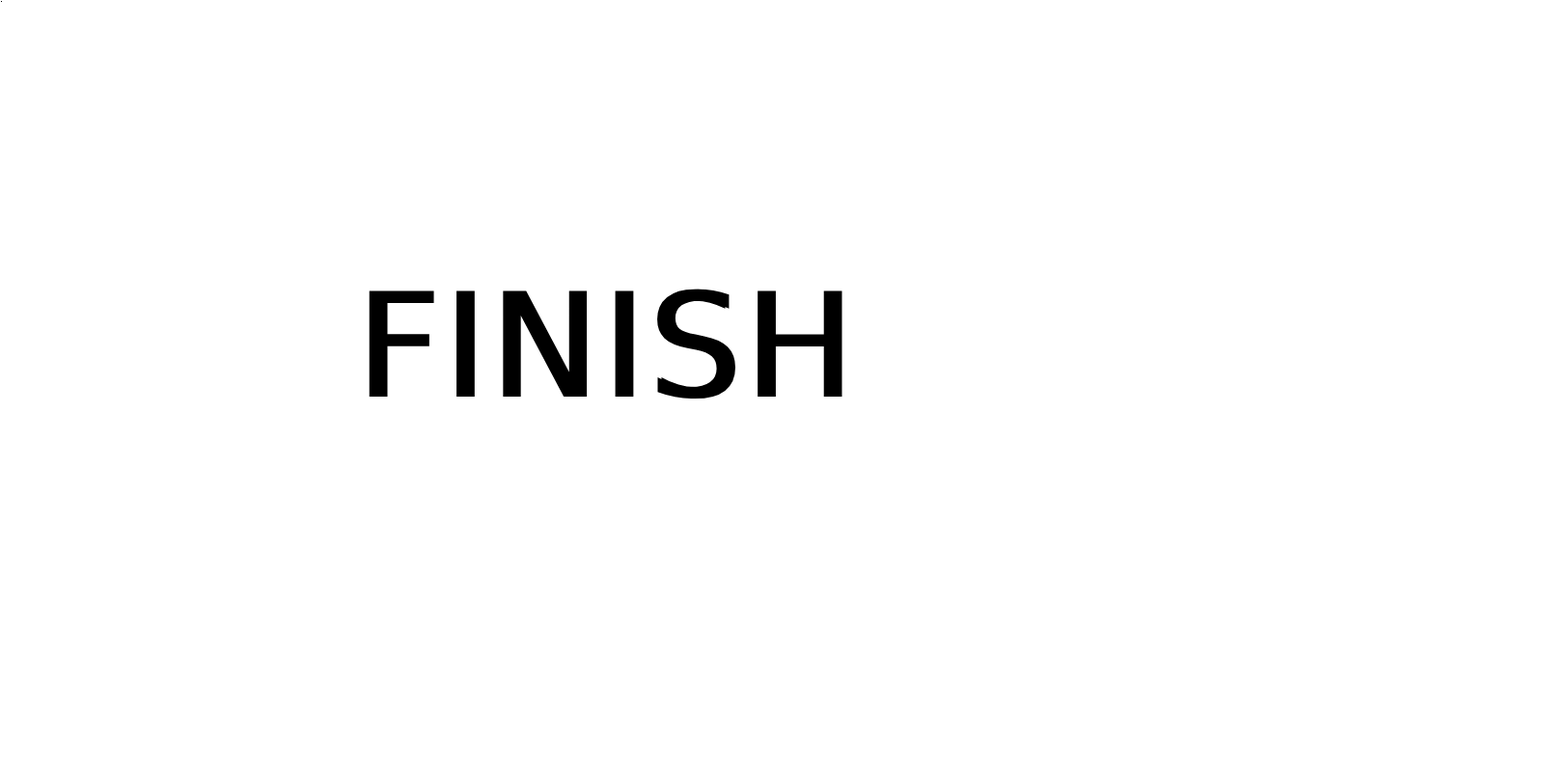
<style>
.page{position:relative;width:1544px;height:772px;background:#ffffff}
.page>*{position:absolute;margin:0}
.t1{font:144.8px "DejaVuSans";color:#000000;font-weight:bold}
</style>
<div class="page">
<p class="t1" style="left:369px;top:289px;width:474px;height:111px">FINISH</p>
</div>
